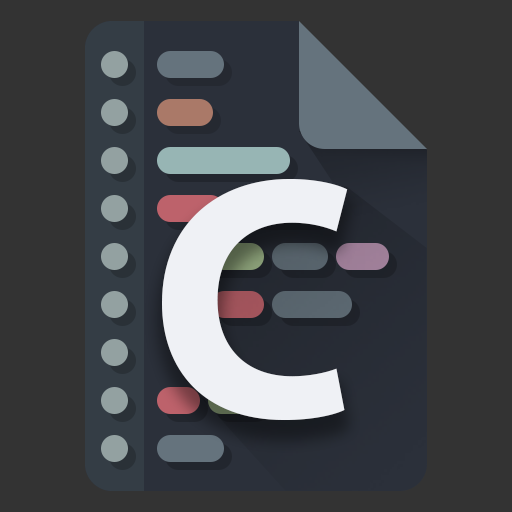
<style>
.page{position:relative;width:512px;height:512px;background:#333333}
.page>*{position:absolute;margin:0}
.t1{font:346.7px "MyriadPro-Bold";color:#eff1f5}
</style>
<div class="page">
<p class="t1" style="left:162px;top:179px;width:186px;height:242px">C</p>
</div>
